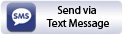
<style>
.page{position:relative;width:123px;height:35px}
.page>*{position:absolute;margin:0}
.t1{font:11px "MyriadPro-Regular";color:#000000}
</style>
<div class="page">
<p class="t1" style="left:46px;top:6px;width:63px;height:23px;text-align:center">Send via <br>Text Message</p>
</div>
